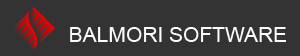
<style>
.page{position:relative;width:300px;height:56px;background:#333333}
.page>*{position:absolute;margin:0}
.t1{font:21px "ArialMT";color:#fcfcfc}
</style>
<div class="page">
<p class="t1" style="left:70px;top:27px;width:216px;height:15px">BALMORI SOFTWARE</p>
</div>
